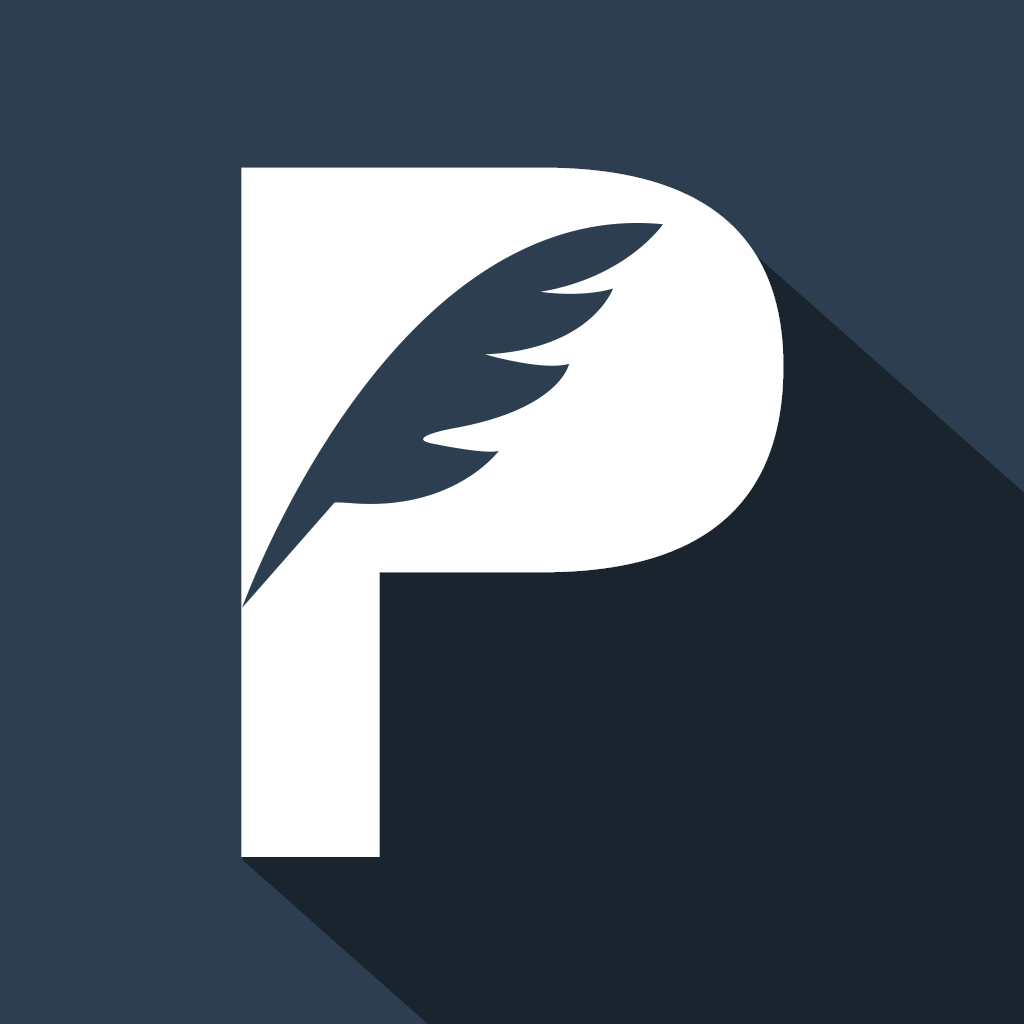
<style>
.page{position:relative;width:1024px;height:1024px;background:#2c3e50}
.page>*{position:absolute;margin:0}
.t1{font:940.5px "nevis-Bold";letter-spacing:0.25em;color:#ffffff}
</style>
<div class="page">
<p class="t1" style="left:241px;top:167px;width:543px;height:690px">P</p>
</div>
